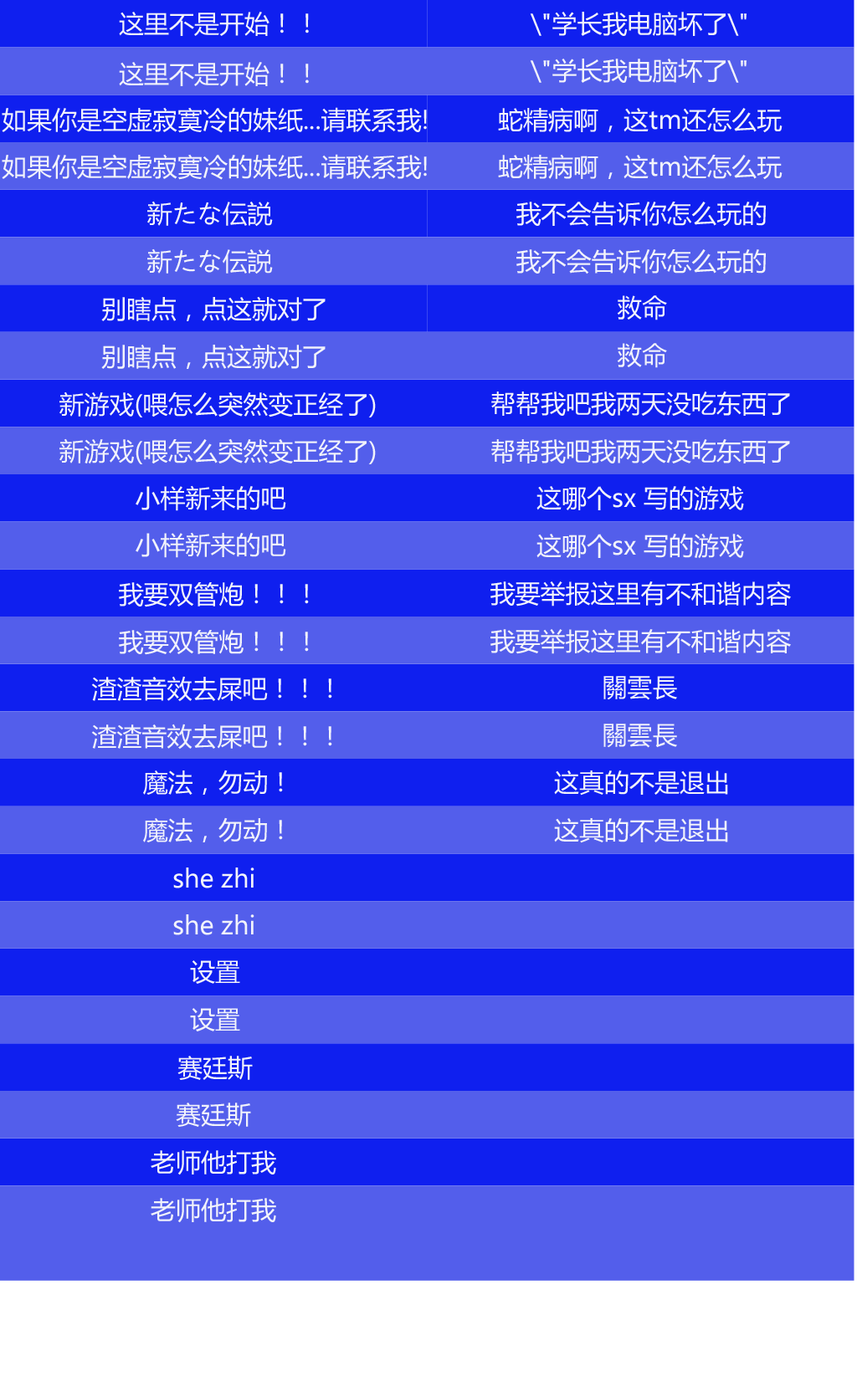
<style>
.page{position:relative;width:857px;height:1392px;background:#535eeb}
.page>*{position:absolute;margin:0}
.t1{font:25.1px "MicrosoftYaHei";color:#f2f3fb}
</style>
<div class="page">
<p class="t1" style="left:119px;top:12px;width:190px;height:24px">这里不是开始！！</p>
<p class="t1" style="left:530px;top:12px;width:216px;height:24px">\"学长我电脑坏了\"</p>
<p class="t1" style="left:119px;top:62px;width:190px;height:24px">这里不是开始！！</p>
<p class="t1" style="left:530px;top:59px;width:216px;height:24px">\"学长我电脑坏了\"</p>
<p class="t1" style="left:2px;top:107px;width:425px;height:26px">如果你是空虚寂寞冷的妹纸...请联系我!</p>
<p class="t1" style="left:498px;top:107px;width:284px;height:26px">蛇精病啊，这tm还怎么玩</p>
<p class="t1" style="left:2px;top:154px;width:425px;height:26px">如果你是空虚寂寞冷的妹纸...请联系我!</p>
<p class="t1" style="left:498px;top:154px;width:284px;height:26px">蛇精病啊，这tm还怎么玩</p>
<p class="t1" style="left:147px;top:201px;width:126px;height:26px">新たな伝説</p>
<p class="t1" style="left:516px;top:202px;width:249px;height:25px">我不会告诉你怎么玩的</p>
<p class="t1" style="left:147px;top:248px;width:126px;height:26px">新たな伝説</p>
<p class="t1" style="left:516px;top:249px;width:249px;height:25px">我不会告诉你怎么玩的</p>
<p class="t1" style="left:101px;top:296px;width:224px;height:26px">别瞎点，点这就对了</p>
<p class="t1" style="left:617px;top:295px;width:50px;height:25px">救命</p>
<p class="t1" style="left:101px;top:344px;width:224px;height:26px">别瞎点，点这就对了</p>
<p class="t1" style="left:617px;top:343px;width:50px;height:25px">救命</p>
<p class="t1" style="left:59px;top:392px;width:317px;height:25px">新游戏(喂怎么突然变正经了)</p>
<p class="t1" style="left:491px;top:392px;width:299px;height:24px">帮帮我吧我两天没吃东西了</p>
<p class="t1" style="left:59px;top:438px;width:317px;height:26px">新游戏(喂怎么突然变正经了)</p>
<p class="t1" style="left:491px;top:439px;width:299px;height:24px">帮帮我吧我两天没吃东西了</p>
<p class="t1" style="left:136px;top:485px;width:150px;height:26px">小样新来的吧</p>
<p class="t1" style="left:536px;top:486px;width:208px;height:25px">这哪个sx 写的游戏</p>
<p class="t1" style="left:136px;top:532px;width:150px;height:26px">小样新来的吧</p>
<p class="t1" style="left:536px;top:534px;width:208px;height:25px">这哪个sx 写的游戏</p>
<p class="t1" style="left:490px;top:581px;width:301px;height:25px">我要举报这里有不和谐内容</p>
<p class="t1" style="left:119px;top:582px;width:190px;height:25px">我要双管炮！！！</p>
<p class="t1" style="left:119px;top:630px;width:190px;height:25px">我要双管炮！！！</p>
<p class="t1" style="left:490px;top:629px;width:301px;height:25px">我要举报这里有不和谐内容</p>
<p class="t1" style="left:91px;top:676px;width:241px;height:26px">渣渣音效去屎吧！！！</p>
<p class="t1" style="left:603px;top:676px;width:74px;height:24px">關雲長</p>
<p class="t1" style="left:91px;top:724px;width:241px;height:26px">渣渣音效去屎吧！！！</p>
<p class="t1" style="left:603px;top:724px;width:74px;height:24px">關雲長</p>
<p class="t1" style="left:143px;top:770px;width:140px;height:25px">魔法，勿动！</p>
<p class="t1" style="left:554px;top:770px;width:174px;height:26px">这真的不是退出</p>
<p class="t1" style="left:143px;top:817px;width:140px;height:25px">魔法，勿动！</p>
<p class="t1" style="left:554px;top:818px;width:174px;height:25px">这真的不是退出</p>
<p class="t1" style="left:173px;top:867px;width:81px;height:21px">she zhi</p>
<p class="t1" style="left:173px;top:914px;width:81px;height:21px">she zhi</p>
<p class="t1" style="left:190px;top:960px;width:50px;height:24px">设置</p>
<p class="t1" style="left:190px;top:1008px;width:50px;height:23px">设置</p>
<p class="t1" style="left:177px;top:1056px;width:76px;height:24px">赛廷斯</p>
<p class="t1" style="left:176px;top:1103px;width:75px;height:24px">赛廷斯</p>
<p class="t1" style="left:151px;top:1150px;width:125px;height:25px">老师他打我</p>
<p class="t1" style="left:151px;top:1198px;width:125px;height:25px">老师他打我</p>
</div>
